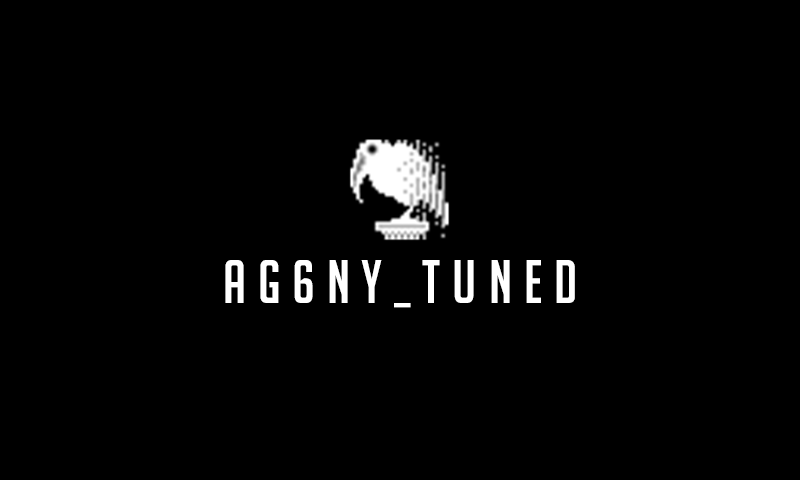
<style>
.page{position:relative;width:800px;height:480px;background:#000000}
.page>*{position:absolute;margin:0}
.t1{font:60px "BigNoodleTitling";letter-spacing:0.2em;color:#ffffff}
</style>
<div class="page">
<p class="t1" style="left:225px;top:260px;width:350px;height:48px">AG6NY_TUNED</p>
</div>
